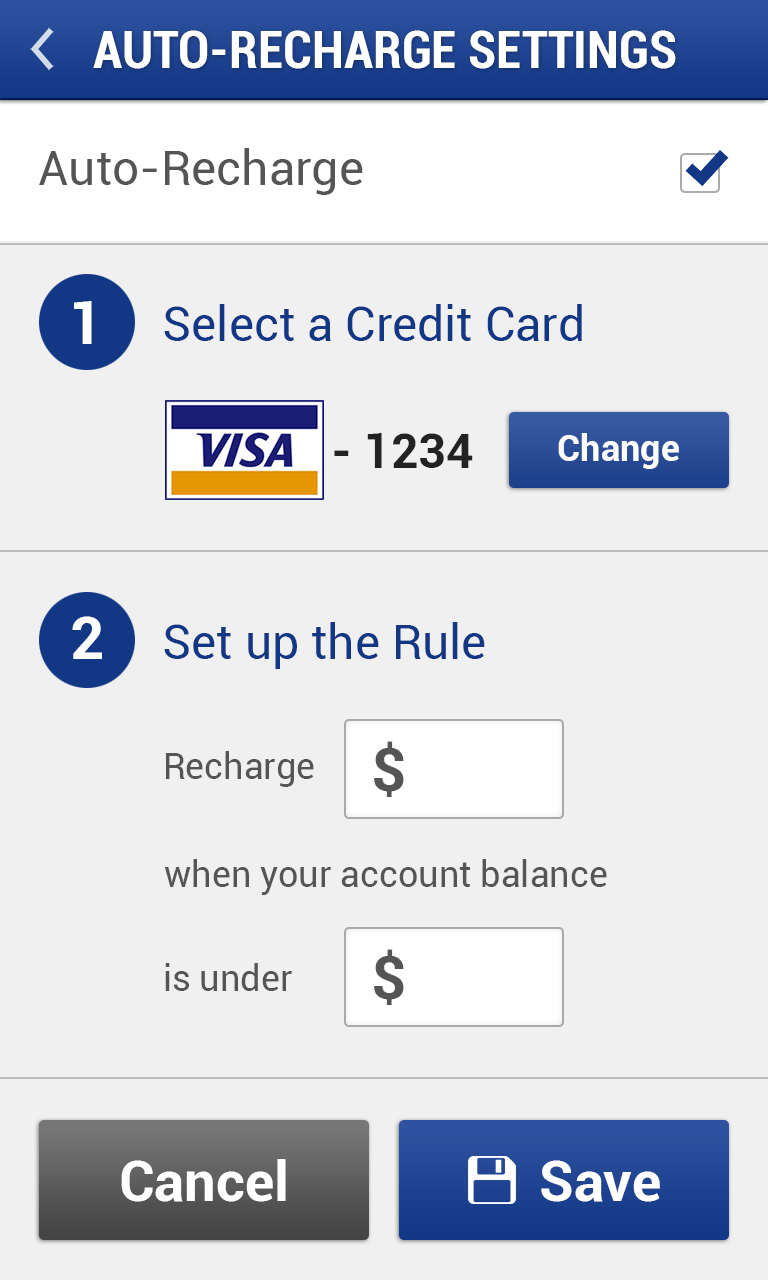
<style>
.page{position:relative;width:768px;height:1280px;background:#f0f0f0}
.page>*{position:absolute;margin:0}
.t1{font:52px "Roboto-BoldCondensed";color:#ffffff}
.t2{font:48px "Roboto-Regular";color:#555555}
.t3{font:60px "Roboto-Bold";color:#ffffff}
.t4{font:48px "Roboto-Regular";color:#123785}
.t5{font:48px "Roboto-Bold";color:#222222}
.t6{font:36px "Roboto-Bold";color:#ffffff}
.t7{font:60px "Roboto-Bold";color:#555555}
.t8{font:36px "Roboto-Regular";color:#555555}
.t9{font:56px "Roboto-Bold";color:#ffffff}
</style>
<div class="page">
<p class="t1" style="left:93px;top:30px;width:583px;height:39px">AUTO-RECHARGE SETTINGS</p>
<p class="t2" style="left:39px;top:148px;width:324px;height:47px">Auto-Recharge</p>
<p class="t3" style="left:74px;top:301px;width:18px;height:43px">1</p>
<p class="t4" style="left:164px;top:304px;width:418px;height:37px">Select a Credit Card</p>
<p class="t5" style="left:334px;top:433px;width:139px;height:35px">- 1234</p>
<p class="t6" style="left:558px;top:433px;width:121px;height:36px">Change</p>
<p class="t3" style="left:72px;top:616px;width:30px;height:43px">2</p>
<p class="t4" style="left:164px;top:622px;width:321px;height:47px">Set up the Rule</p>
<p class="t7" style="left:374px;top:741px;width:30px;height:56px">$</p>
<p class="t8" style="left:166px;top:751px;width:148px;height:36px">Recharge</p>
<p class="t8" style="left:164px;top:859px;width:443px;height:36px">when your account balance</p>
<p class="t7" style="left:374px;top:949px;width:30px;height:56px">$</p>
<p class="t8" style="left:165px;top:963px;width:127px;height:28px">is under</p>
<p class="t9" style="left:121px;top:1159px;width:165px;height:43px">Cancel</p>
<p class="t9" style="left:541px;top:1160px;width:119px;height:42px">Save</p>
</div>
